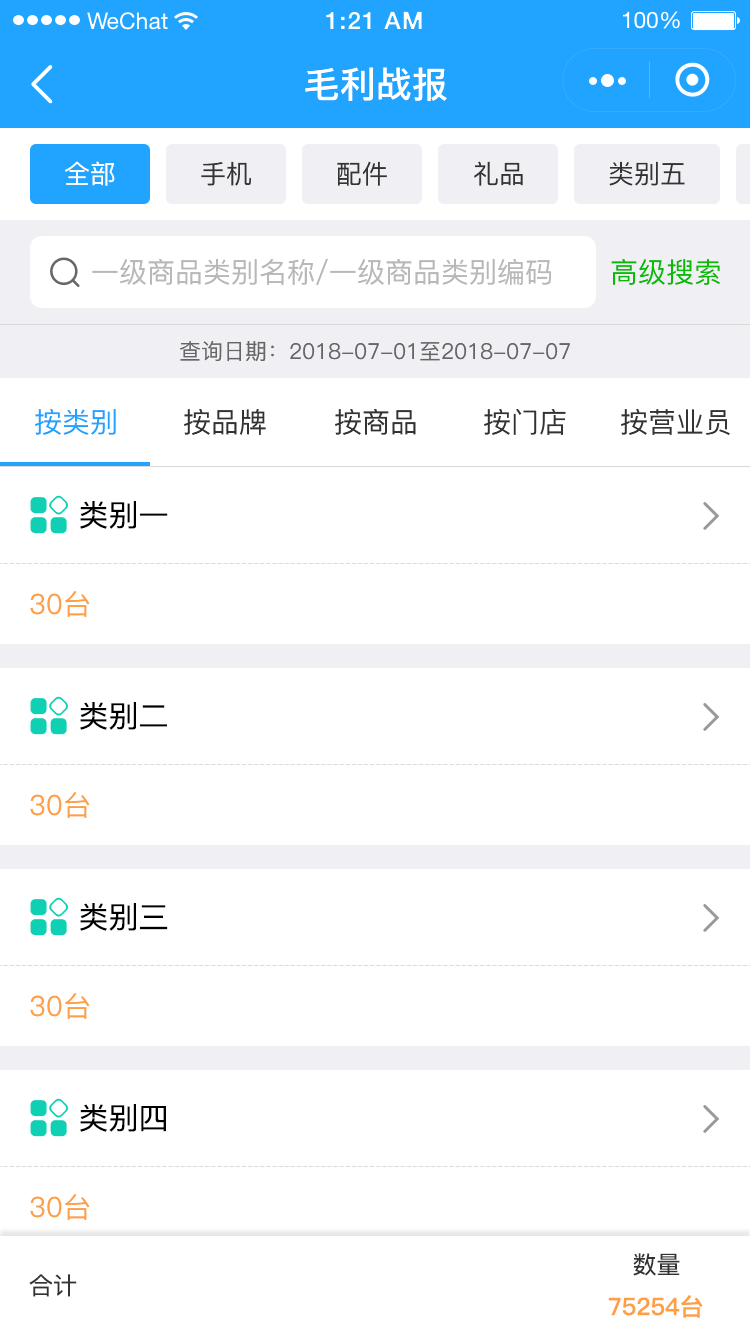
<style>
.page{position:relative;width:750px;height:1334px;background:#ffffff}
.page>*{position:absolute;margin:0}
.t1{font:36px "PingFang-SC-Bold";color:#ffffff}
.t2{font:26px "PingFang-SC-Medium";color:#ffffff}
.t3{font:26px "PingFang-SC-Medium";color:#333333}
.t4{font:28px "PingFang-SC-Medium";color:#b8b8b8}
.t5{font:28px "PingFang-SC-Medium";color:#09bb07}
.t6{font:22px "PingFang-SC-Medium";color:#666666}
.t7{font:28px "PingFang-SC-Medium";color:#21a4ff}
.t8{font:28px "PingFang-SC-Medium";color:#333333}
.t9{font:30px "PingFang-SC-Medium";color:#000000}
.t10{font:28px "PingFang-SC-Medium";color:#fe9f45}
.t11{font:24px "PingFang-SC-Medium";color:#333333}
.t12{font:24px "PingFang-SC-Bold";color:#fe9f45}
</style>
<div class="page">
<p class="t1" style="left:305px;top:67px;width:142px;height:34px">毛利战报</p>
<p class="t2" style="left:65px;top:161px;width:50px;height:25px">全部</p>
<p class="t3" style="left:201px;top:161px;width:50px;height:25px">手机</p>
<p class="t3" style="left:337px;top:161px;width:50px;height:25px">配件</p>
<p class="t3" style="left:474px;top:161px;width:49px;height:25px">礼品</p>
<p class="t3" style="left:609px;top:161px;width:76px;height:25px">类别五</p>
<p class="t4" style="left:92px;top:259px;width:459px;height:26px">一级商品类别名称/一级商品类别编码</p>
<p class="t5" style="left:611px;top:259px;width:109px;height:26px">高级搜索</p>
<p class="t6" style="left:180px;top:341px;width:390px;height:21px">查询日期：2018-07-01至2018-07-07</p>
<p class="t7" style="left:35px;top:409px;width:81px;height:26px">按类别</p>
<p class="t8" style="left:184px;top:409px;width:82px;height:26px">按品牌</p>
<p class="t8" style="left:335px;top:409px;width:81px;height:26px">按商品</p>
<p class="t8" style="left:484px;top:409px;width:82px;height:26px">按门店</p>
<p class="t8" style="left:621px;top:409px;width:109px;height:26px">按营业员</p>
<p class="t9" style="left:80px;top:501px;width:88px;height:28px">类别一</p>
<p class="t10" style="left:30px;top:591px;width:60px;height:26px">30台</p>
<p class="t9" style="left:80px;top:702px;width:87px;height:28px">类别二</p>
<p class="t10" style="left:30px;top:792px;width:60px;height:26px">30台</p>
<p class="t9" style="left:80px;top:903px;width:88px;height:28px">类别三</p>
<p class="t10" style="left:30px;top:993px;width:60px;height:26px">30台</p>
<p class="t9" style="left:80px;top:1104px;width:86px;height:28px">类别四</p>
<p class="t10" style="left:30px;top:1194px;width:60px;height:26px">30台</p>
<p class="t11" style="left:633px;top:1253px;width:47px;height:23px">数量</p>
<p class="t11" style="left:29px;top:1274px;width:48px;height:23px">合计</p>
<p class="t12" style="left:608px;top:1295px;width:95px;height:23px">75254台</p>
</div>
